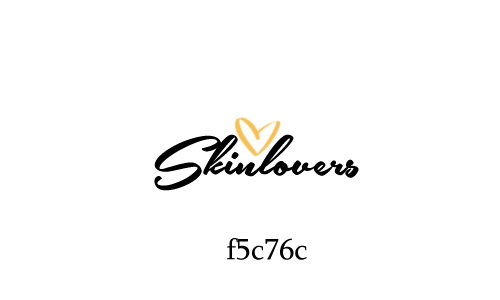
<style>
.page{position:relative;width:500px;height:300px;background:#ffffff}
.page>*{position:absolute;margin:0}
.t1{font:72px "SouthernAirePersonalUseOnly";color:#000000}
.t2{font:30px "Sylfaen";color:#000000}
</style>
<div class="page">
<p class="t1" style="left:154px;top:134px;width:205px;height:57px">Skinlovers</p>
<p class="t2" style="left:227px;top:238px;width:80px;height:22px">f5c76c</p>
</div>
